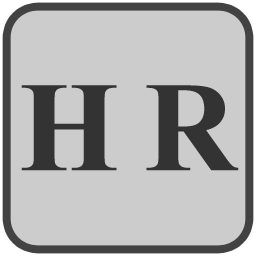
<style>
.page{position:relative;width:256px;height:256px;background:#cccccc}
.page>*{position:absolute;margin:0}
.t1{font:128px "TimesNewRomanPS-BoldMT";letter-spacing:-0.025em;color:#333333}
</style>
<div class="page">
<p class="t1" style="left:21px;top:85px;width:218px;height:86px">H R</p>
</div>
